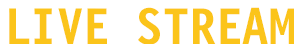
<style>
.page{position:relative;width:304px;height:44px;background:#ffffff}
.page>*{position:absolute;margin:0}
.t1{font:53px "LetterGothic12PitchBT-Bold";color:#fbc41a;text-transform:uppercase}
</style>
<div class="page">
<p class="t1" style="left:9px;top:7px;width:285px;height:38px">Live stream</p>
</div>
